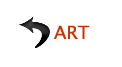
<style>
.page{position:relative;width:122px;height:67px;background:#ffffff}
.page>*{position:absolute;margin:0}
.t1{font:18px "LucidaSans";color:#cc3300}
</style>
<div class="page">
<p class="t1" style="left:54px;top:25px;width:36px;height:14px">ART</p>
</div>
